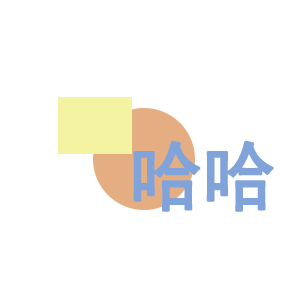
<style>
.page{position:relative;width:300px;height:300px;background:#ffffff}
.page>*{position:absolute;margin:0}
.t1{font:75px "SimHei";letter-spacing:-0.05em;color:#80a3d9;font-weight:bold}
</style>
<div class="page">
<p class="t1" style="left:133px;top:140px;width:141px;height:72px">哈哈</p>
</div>
